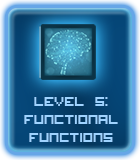
<style>
.page{position:relative;width:140px;height:160px}
.page>*{position:absolute;margin:0}
.t1{font:22px/18px "VisitorTT2BRK";color:#9fd3ff}
</style>
<div class="page">
<p class="t1" style="left:24px;top:97px;width:94px;height:45px;text-align:center">Level 5:<br>Functional<br>Functions</p>
</div>
